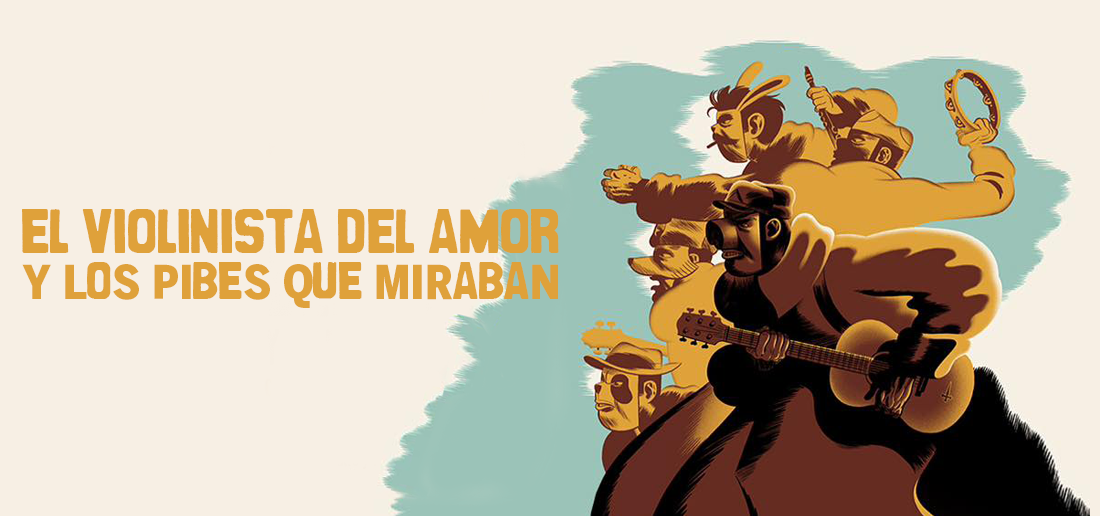
<style>
.page{position:relative;width:1100px;height:516px;background:#f7efe4}
.page>*{position:absolute;margin:0}
.t1{font:55px "CanCandeBois-Bold";color:#dfa13a;text-transform:uppercase}
.t2{font:46.4px "BentonSansCondBlack";color:#dfa13a;text-transform:uppercase}
.t3{font:46.4px "CanCandeBois-Bold";color:#dfa13a;text-transform:uppercase}
</style>
<div class="page">
<p class="t1" style="left:22px;top:209px;width:537px;height:44px">EL VIOLINISTA DEL AMOR</p>
<p class="t2" style="left:22px;top:262px;width:536px;height:46px">y l<span class="t3">o</span>s pi<span class="t3">be</span>s q<span class="t3">ue </span>mir<span class="t3">aba</span>n</p>
</div>
